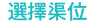
<style>
.page{position:relative;width:94px;height:21px;background:#ffffff}
.page>*{position:absolute;margin:0}
.t1{font:20px "GothicMB101Pr6N-Medium";color:#1cbcbf}
</style>
<div class="page">
<p class="t1" style="left:8px;top:2px;width:79px;height:19px">選擇渠位</p>
</div>
